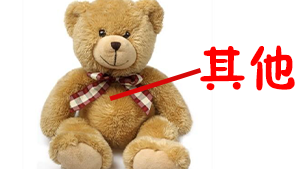
<style>
.page{position:relative;width:298px;height:169px;background:#ffffff}
.page>*{position:absolute;margin:0}
.t1{font:50px "FZSEJW--GB1-0";color:#ff0000}
</style>
<div class="page">
<p class="t1" style="left:200px;top:45px;width:95px;height:46px">其他</p>
</div>
